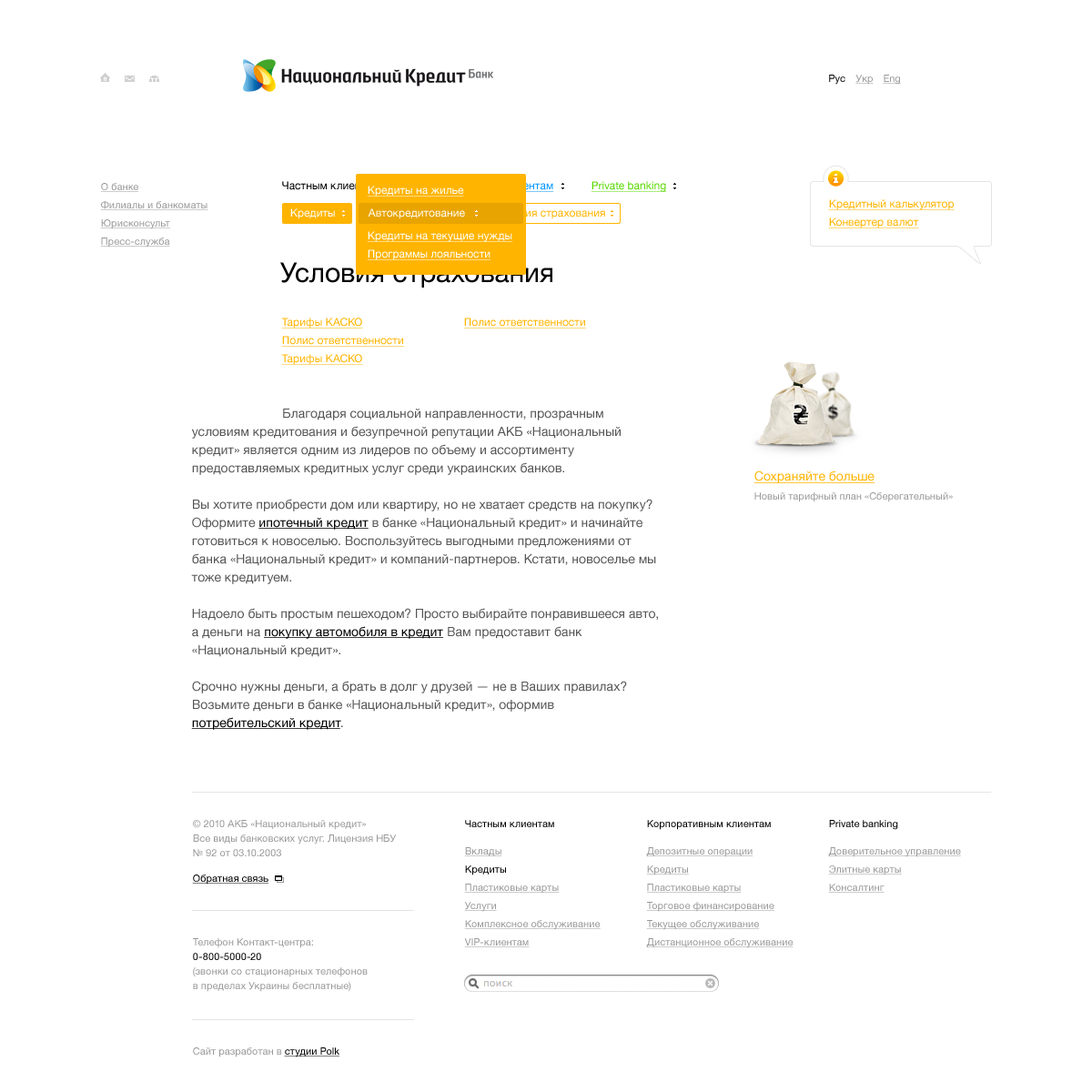
<style>
.page{position:relative;width:1092px;height:1092px;background:#ffffff}
.page>*{position:absolute;margin:0}
.t1{font:10px "HelveticaNeue";color:#000000}
.t2{font:10px "HelveticaNeue";color:#999999;text-decoration:underline}
.t3{font:10.9px "HelveticaNeue";color:#000000}
.t4{font:10.9px "HelveticaNeue";color:#fffffe;text-decoration:underline}
.t5{font:10.9px "HelveticaNeue";color:#ffb400;text-decoration:underline}
.t6{font:10.9px "HelveticaNeue";color:#57d900;text-decoration:underline}
.t7{font:10.9px "HelveticaNeue";color:#fffffe}
.t8{font:10.9px "HelveticaNeue";color:#ffb400}
.t9{font:27.3px "HelveticaNeue";color:#000000}
.t10{font:12.7px/18.2px "HelveticaNeue";color:#555555}
.t11{font:12.7px/18.2px "HelveticaNeue";color:#000000;text-decoration:underline}
.t12{font:12.7px "HelveticaNeue";color:#ffb400;text-decoration:underline}
.t13{font:10px "HelveticaNeue";color:#999999}
.t14{font:10px/14.6px "HelveticaNeue";color:#999999}
.t15{font:10px "HelveticaNeue";color:#000000;text-decoration:underline}
.t16{font:10px/14.6px "HelveticaNeue";color:#010101}
</style>
<div class="page">
<p class="t1" style="left:829px;top:75px;width:16px;height:10px">Рус</p>
<p class="t2" style="left:855px;top:75px;width:19px;height:10px">Укр</p>
<p class="t2" style="left:883px;top:75px;width:18px;height:10px">Eng</p>
<p class="t2" style="left:100px;top:183px;width:39px;height:9px">О банке</p>
<p class="t3" style="left:282px;top:181px;width:97px;height:9px">Частным клиентам</p>
<p class="t4" style="left:367px;top:186px;width:97px;height:11px">Кредиты на жилье</p>
<p class="t5" style="left:418px;top:181px;width:136px;height:11px">Корпоративным клиентам</p>
<p class="t6" style="left:591px;top:181px;width:76px;height:11px">Private banking</p>
<p class="t2" style="left:100px;top:201px;width:108px;height:9px">Филиалы и банкоматы</p>
<p class="t7" style="left:290px;top:208px;width:45px;height:11px">Кредиты</p>
<p class="t7" style="left:368px;top:208px;width:97px;height:11px">Автокредитование</p>
<p class="t8" style="left:494px;top:208px;width:111px;height:11px">Условия страхования</p>
<p class="t5" style="left:828px;top:199px;width:127px;height:11px">Кредитный калькулятор</p>
<p class="t2" style="left:100px;top:219px;width:70px;height:10px">Юрисконсульт</p>
<p class="t5" style="left:828px;top:217px;width:91px;height:11px">Конвертер валют</p>
<p class="t4" style="left:367px;top:231px;width:146px;height:11px">Кредиты на текущие нужды</p>
<p class="t2" style="left:100px;top:238px;width:70px;height:10px">Пресс-служба</p>
<p class="t4" style="left:367px;top:249px;width:124px;height:11px">Программы лояльности</p>
<p class="t9" style="left:280px;top:262px;width:272px;height:26px">Условия страхования</p>
<p class="t5" style="left:281px;top:318px;width:82px;height:11px">Тарифы КАСКО</p>
<p class="t5" style="left:463px;top:318px;width:123px;height:11px">Полис ответственности</p>
<p class="t5" style="left:281px;top:336px;width:123px;height:11px">Полис ответственности</p>
<p class="t5" style="left:281px;top:354px;width:82px;height:11px">Тарифы КАСКО</p>
<p class="t10" style="left:191px;top:409px;width:467px;height:321px">Благодаря социальной направленности, прозрачным условиям кредитования и безупречной репутации АКБ «Национальный кредит» является одним из лидеров по объему и ассортименту предоставляемых кредитных услуг среди украинских банков.<br><br>Вы хотите приобрести дом или квартиру, но не хватает средств на покупку? Оформите <span class="t11">ипотечный кредит</span> в банке «Национальный кредит» и начинайте готовиться к новоселью. Воспользуйтесь выгодными предложениями от банка «Национальный кредит» и компаний-партнеров. Кстати, новоселье мы тоже кредитуем.<br><br>Надоело быть простым пешеходом? Просто выбирайте понравившееся авто, а деньги на <span class="t11">покупку автомобиля в кредит</span> Вам предоставит банк «Национальный кредит».<br><br>Срочно нужны деньги, а брать в долг у друзей — не в Ваших правилах? Возьмите деньги в банке «Национальный кредит», оформив <span class="t11">потребительский кредит</span>.</p>
<p class="t12" style="left:753px;top:470px;width:121px;height:13px">Сохраняйте больше</p>
<p class="t13" style="left:754px;top:492px;width:199px;height:10px">Новый тарифный план «Сберегательный»</p>
<p class="t14" style="left:193px;top:820px;width:204px;height:36px">© 2010 АКБ «Национальный кредит»<br>Все виды банковских услуг. Лицензия НБУ<br>№ 92 от 03.10.2003</p>
<p class="t1" style="left:465px;top:820px;width:89px;height:7px">Частным клиентам</p>
<p class="t1" style="left:647px;top:820px;width:124px;height:10px">Корпоративным клиентам</p>
<p class="t1" style="left:829px;top:820px;width:69px;height:10px">Private banking</p>
<p class="t2" style="left:464px;top:847px;width:38px;height:9px">Вклады</p>
<p class="t2" style="left:646px;top:847px;width:107px;height:10px">Депозитные операции</p>
<p class="t2" style="left:828px;top:847px;width:133px;height:10px">Доверительное управление</p>
<p class="t1" style="left:465px;top:865px;width:41px;height:10px">Кредиты</p>
<p class="t2" style="left:646px;top:865px;width:43px;height:10px">Кредиты</p>
<p class="t2" style="left:828px;top:865px;width:74px;height:10px">Элитные карты</p>
<p class="t15" style="left:192px;top:874px;width:76px;height:11px">Обратная связь</p>
<p class="t2" style="left:464px;top:884px;width:96px;height:10px">Пластиковые карты</p>
<p class="t2" style="left:646px;top:884px;width:96px;height:10px">Пластиковые карты</p>
<p class="t2" style="left:828px;top:884px;width:57px;height:9px">Консалтинг</p>
<p class="t2" style="left:464px;top:902px;width:33px;height:10px">Услуги</p>
<p class="t2" style="left:646px;top:902px;width:128px;height:10px">Торговое финансирование</p>
<p class="t2" style="left:464px;top:920px;width:137px;height:10px">Комплексное обслуживание</p>
<p class="t2" style="left:646px;top:920px;width:114px;height:10px">Текущее обслуживание</p>
<p class="t14" style="left:193px;top:938px;width:175px;height:54px">Телефон Контакт-центра:<br><span class="t16">0-800-5000-20<br></span>(звонки со стационарных телефонов<br>в пределах Украины бесплатные)</p>
<p class="t2" style="left:464px;top:938px;width:66px;height:9px">VIP-клиентам</p>
<p class="t2" style="left:646px;top:938px;width:148px;height:10px">Дистанционное обслуживание</p>
<p class="t13" style="left:193px;top:1047px;width:146px;height:10px">Сайт разработан в <span class="t15">студии Polk</span></p>
</div>
